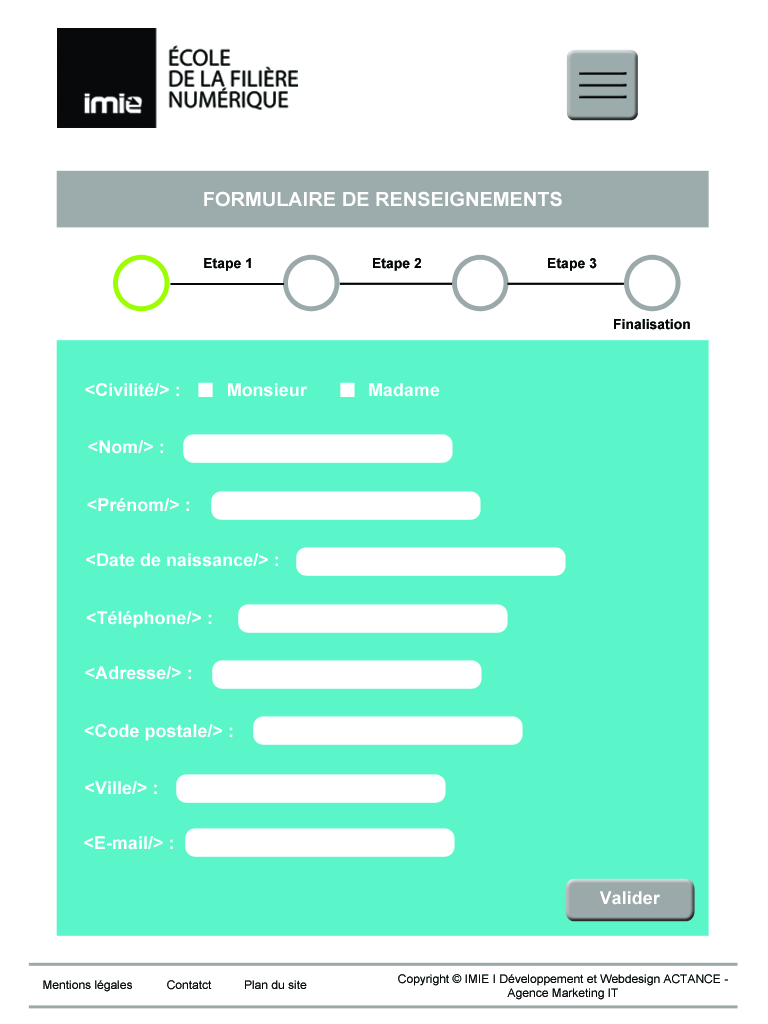
<style>
.page{position:relative;width:768px;height:1024px;background:#ffffff}
.page>*{position:absolute;margin:0}
.t1{font:19.6px "Arial-BoldMT";color:#ffffff}
.t2{font:13.7px "Arial-BoldMT";color:#060808}
.t3{font:17.6px "Arial-BoldMT";color:#ffffff}
.t4{font:11.8px "ArialMT";color:#060808}
</style>
<div class="page">
<p class="t1" style="left:204px;top:191px;width:358px;height:16px">FORMULAIRE DE RENSEIGNEMENTS</p>
<p class="t2" style="left:204px;top:258px;width:47px;height:13px">Etape 1</p>
<p class="t2" style="left:373px;top:258px;width:48px;height:13px">Etape 2</p>
<p class="t2" style="left:548px;top:258px;width:49px;height:13px">Etape 3</p>
<p class="t2" style="left:614px;top:319px;width:76px;height:11px">Finalisation</p>
<p class="t3" style="left:85px;top:383px;width:94px;height:14px">&lt;Civilité/&gt; :</p>
<p class="t3" style="left:228px;top:383px;width:79px;height:14px">Monsieur</p>
<p class="t3" style="left:369px;top:383px;width:71px;height:14px">Madame</p>
<p class="t3" style="left:88px;top:440px;width:75px;height:14px">&lt;Nom/&gt; :</p>
<p class="t3" style="left:87px;top:498px;width:102px;height:14px">&lt;Prénom/&gt; :</p>
<p class="t3" style="left:86px;top:553px;width:192px;height:14px">&lt;Date de naissance/&gt; :</p>
<p class="t3" style="left:86px;top:611px;width:126px;height:17px">&lt;Téléphone/&gt; :</p>
<p class="t3" style="left:85px;top:666px;width:106px;height:14px">&lt;Adresse/&gt; :</p>
<p class="t3" style="left:84px;top:724px;width:149px;height:17px">&lt;Code postale/&gt; :</p>
<p class="t3" style="left:85px;top:781px;width:72px;height:14px">&lt;Ville/&gt; :</p>
<p class="t3" style="left:84px;top:836px;width:89px;height:14px">&lt;E-mail/&gt; :</p>
<p class="t3" style="left:599px;top:891px;width:61px;height:14px">Valider</p>
<p class="t4" style="left:398px;top:974px;width:330px;height:26px;text-align:center">Copyright © IMIE I Développement et Webdesign ACTANCE - Agence Marketing IT</p>
<p class="t4" style="left:43px;top:980px;width:89px;height:12px">Mentions légales</p>
<p class="t4" style="left:167px;top:980px;width:45px;height:10px">Contatct</p>
<p class="t4" style="left:245px;top:980px;width:62px;height:9px">Plan du site</p>
</div>
